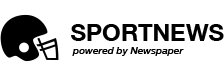
<style>
.page{position:relative;width:224px;height:74px;background:#ffffff}
.page>*{position:absolute;margin:0}
.t1{font:24px "HelveticaNeueLT-Bold";color:#000000}
.t2{font:10px "HelveticaNeueLT-MediumItalic";color:#000000}
</style>
<div class="page">
<p class="t1" style="left:71px;top:24px;width:153px;height:17px">SPORTNEWS</p>
<p class="t2" style="left:72px;top:47px;width:112px;height:9px">powered by Newspaper</p>
</div>
